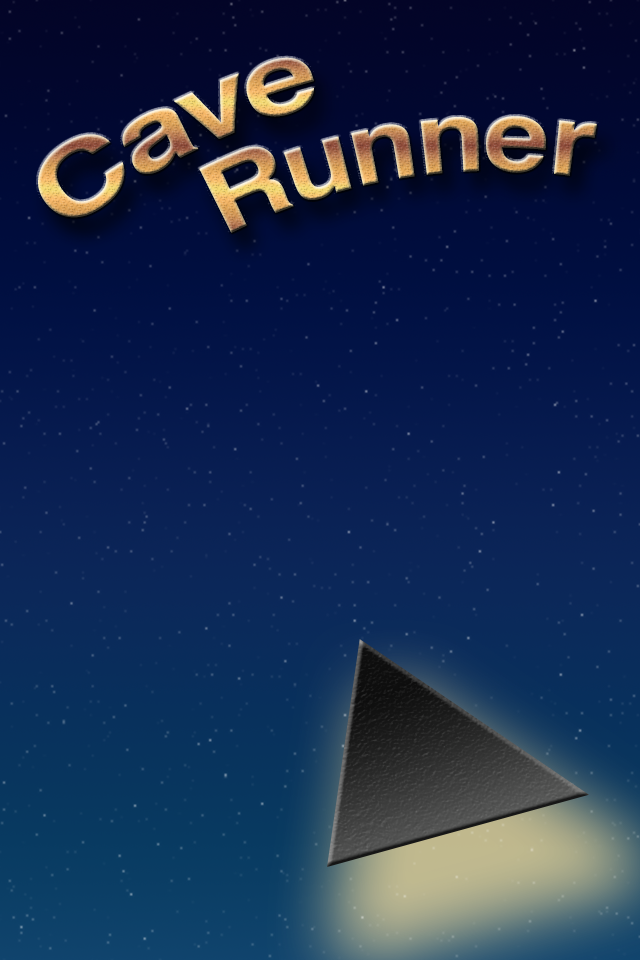
<style>
.page{position:relative;width:640px;height:960px}
.page>*{position:absolute;margin:0}
.t1{font:98.7px/90px "Helvetica-Bold"}
</style>
<div class="page">
<p class="t1" style="left:38px;top:57px;width:559px;height:176px;rotate:-15deg">Cave<br>    Runner</p>
</div>
